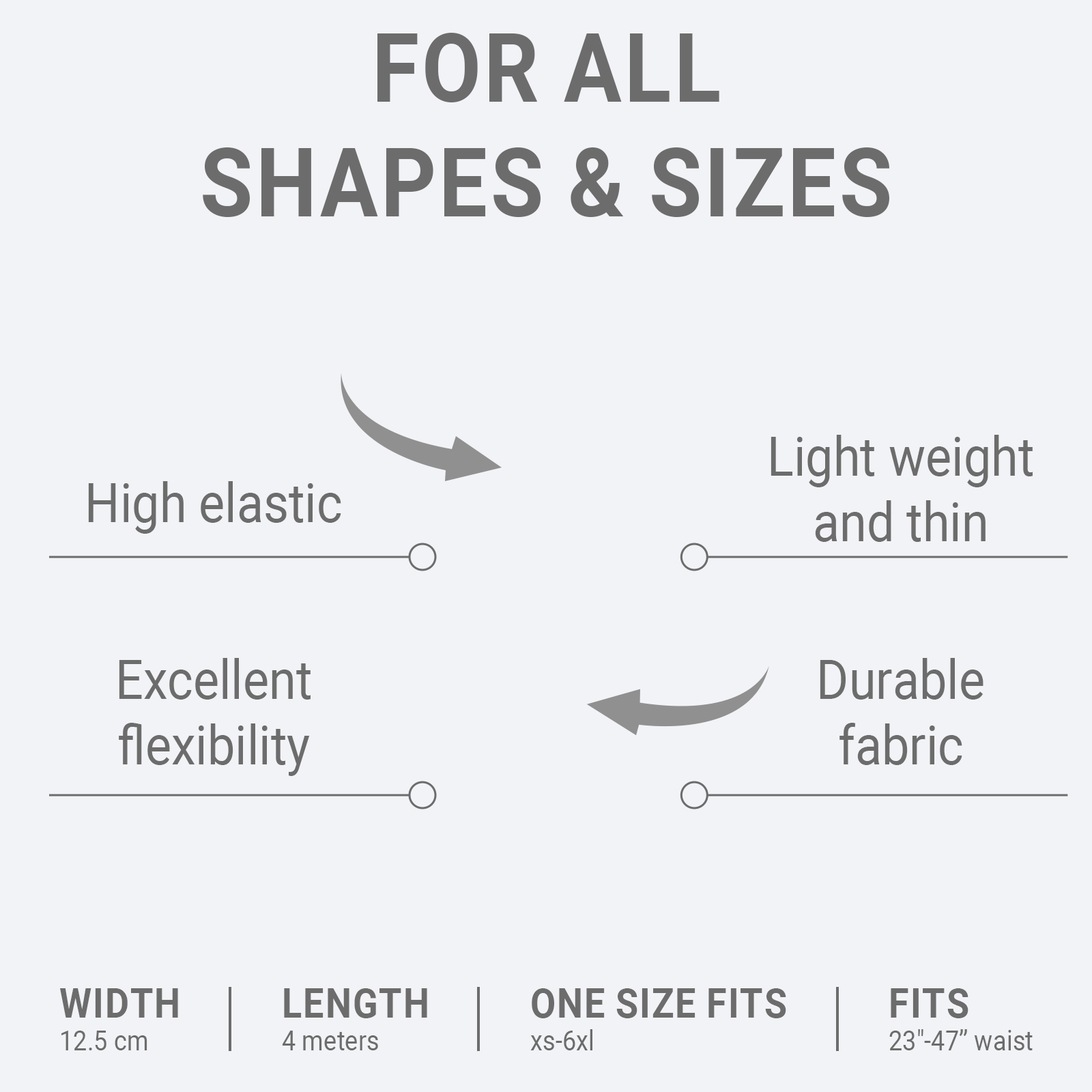
<style>
.page{position:relative;width:1092px;height:1092px;background:#f2f3f6}
.page>*{position:absolute;margin:0}
.t1{font:95.5px "Roboto-Bold";color:#6c6c6c;text-transform:uppercase;scale:0.9 1}
.t2{font:54.6px "Roboto-Regular";color:#6c6c6c;scale:0.9 1}
.t3{font:40.9px "Roboto-Bold";color:#6c6c6c;text-transform:uppercase;scale:0.9 1}
.t4{font:27.7px "Roboto-Regular";color:#6c6c6c;scale:0.9 1}
</style>
<div class="page">
<p class="t1" style="left:203px;top:33px;width:686px;height:184px;text-align:center">For all<br>Shapes &amp; sizes</p>
<p class="t2" style="left:771px;top:435px;width:262px;height:107px;text-align:center">Light weight<br>and thin</p>
<p class="t2" style="left:88px;top:481px;width:253px;height:53px">High elastic</p>
<p class="t2" style="left:119px;top:658px;width:192px;height:118px;text-align:center">Excellent<br>flexibility</p>
<p class="t2" style="left:820px;top:658px;width:163px;height:107px;text-align:center">Durable<br>fabric</p>
<p class="t3" style="left:59px;top:988px;width:119px;height:30px">Width</p>
<p class="t3" style="left:284px;top:988px;width:143px;height:30px">Length</p>
<p class="t3" style="left:532px;top:988px;width:254px;height:30px">One size fits</p>
<p class="t3" style="left:891px;top:988px;width:77px;height:30px">Fits</p>
<p class="t4" style="left:61px;top:1031px;width:86px;height:19px">12.5 cm</p>
<p class="t4" style="left:282px;top:1031px;width:96px;height:19px">4 meters</p>
<p class="t4" style="left:530px;top:1029px;width:62px;height:21px">xs-6xl</p>
<p class="t4" style="left:889px;top:1029px;width:144px;height:21px">23"-47” waist</p>
</div>
